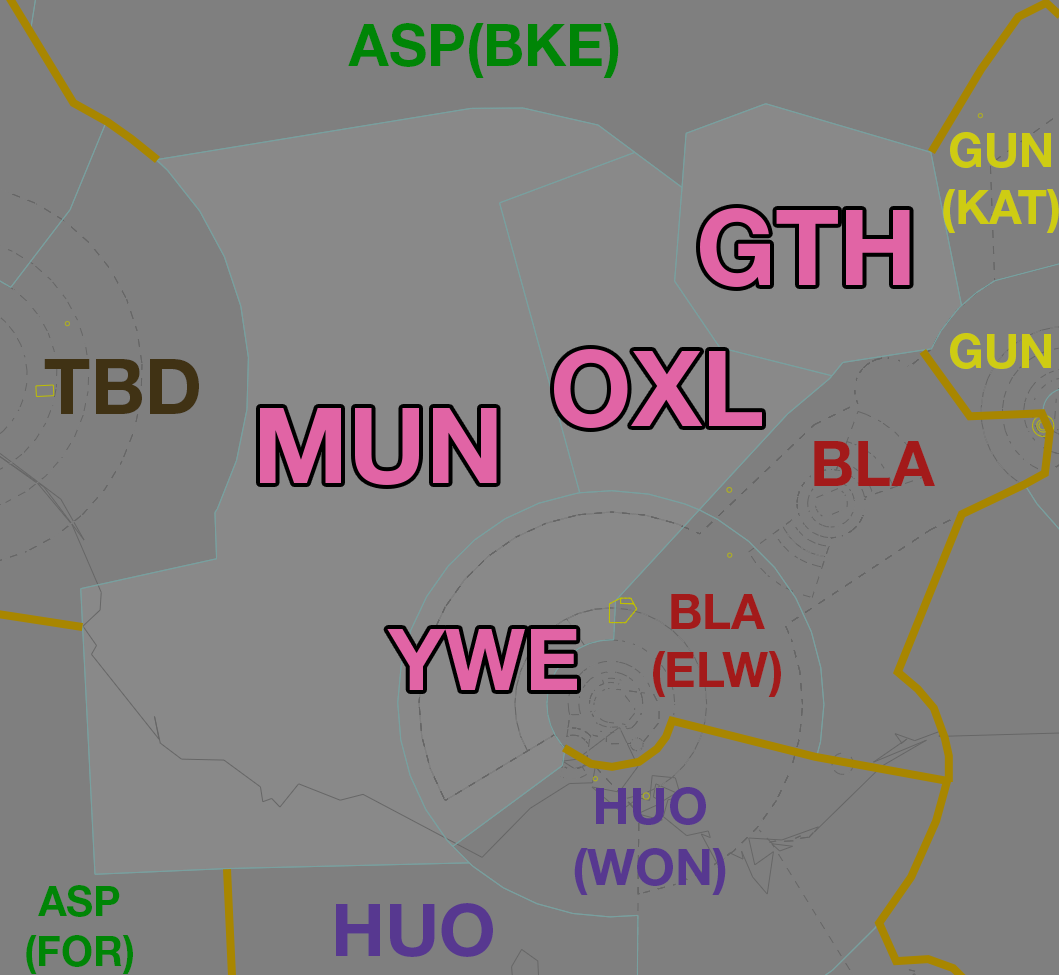
<style>
.page{position:relative;width:1059px;height:975px;background:#7f7f7f}
.page>*{position:absolute;margin:0}
.t1{font:58.3px "HelveticaNeueLTStd-Bd";color:#008506}
.t2{font:47.4px "HelveticaNeueLTStd-Bd";color:#cecc13}
.t3{font:104.7px "HelveticaNeueLTStd-Bd";color:#e164a5}
.t4{font:76.4px "HelveticaNeueLTStd-Bd";color:#403214}
.t5{font:62.6px "HelveticaNeueLTStd-Bd";color:#a31a1a}
.t6{font:48.9px "HelveticaNeueLTStd-Bd";color:#a31a1a}
.t7{font:84.9px "HelveticaNeueLTStd-Bd";color:#e164a5}
.t8{font:50.7px "HelveticaNeueLTStd-Bd";color:#573890}
.t9{font:41.4px "HelveticaNeueLTStd-Bd";color:#008506}
.t10{font:72.9px "HelveticaNeueLTStd-Bd";color:#573890}
</style>
<div class="page">
<p class="t1" style="left:348px;top:23px;width:271px;height:55px">ASP(BKE)</p>
<p class="t2" style="left:943px;top:132px;width:116px;height:101px;text-align:center">GUN<br>(KAT)</p>
<p class="t3" style="left:700px;top:208px;width:210px;height:79px">GTH</p>
<p class="t2" style="left:950px;top:333px;width:101px;height:36px">GUN</p>
<p class="t3" style="left:554px;top:349px;width:208px;height:79px">OXL</p>
<p class="t4" style="left:44px;top:359px;width:155px;height:55px">TBD</p>
<p class="t3" style="left:260px;top:408px;width:237px;height:77px">MUN</p>
<p class="t5" style="left:814px;top:441px;width:121px;height:45px">BLA</p>
<p class="t6" style="left:653px;top:594px;width:128px;height:103px;text-align:center">BLA<br>(ELW)</p>
<p class="t7" style="left:387px;top:629px;width:190px;height:61px">YWE</p>
<p class="t8" style="left:574px;top:787px;width:152px;height:108px;text-align:center">HUO<br>(WON)</p>
<p class="t9" style="left:26px;top:885px;width:107px;height:89px;text-align:center">ASP<br>(FOR)</p>
<p class="t10" style="left:336px;top:903px;width:157px;height:54px">HUO</p>
</div>
